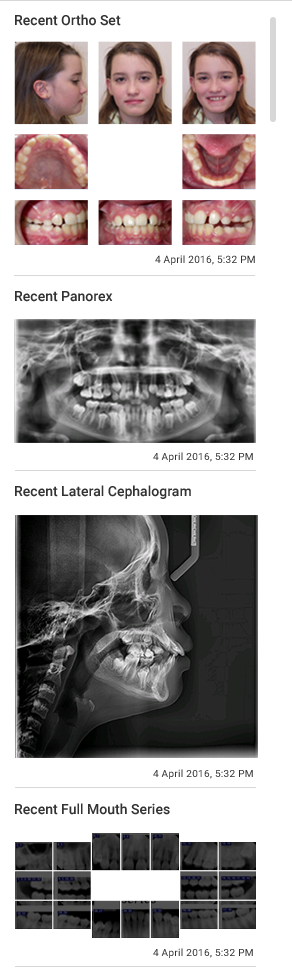
<style>
.page{position:relative;width:292px;height:968px;background:#ffffff}
.page>*{position:absolute;margin:0}
.t1{font:14px "Roboto-Medium";color:#333333}
.t2{font:10px "Roboto-Regular";letter-spacing:0.03em;color:#333333}
</style>
<div class="page">
<p class="t1" style="left:15px;top:14px;width:106px;height:12px">Recent Ortho Set</p>
<p class="t2" style="left:155px;top:255px;width:100px;height:10px">4 April 2016, 5:32 PM</p>
<p class="t1" style="left:15px;top:291px;width:98px;height:11px">Recent Panorex</p>
<p class="t2" style="left:153px;top:452px;width:100px;height:10px">4 April 2016, 5:32 PM</p>
<p class="t1" style="left:15px;top:485px;width:176px;height:14px">Recent Lateral Cephalogram</p>
<p class="t2" style="left:153px;top:769px;width:100px;height:10px">4 April 2016, 5:32 PM</p>
<p class="t1" style="left:15px;top:803px;width:155px;height:12px">Recent Full Mouth Series</p>
<p class="t2" style="left:153px;top:948px;width:100px;height:10px">4 April 2016, 5:32 PM</p>
</div>
